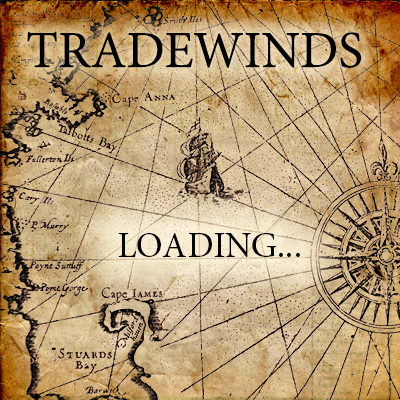
<style>
.page{position:relative;width:400px;height:400px}
.page>*{position:absolute;margin:0}
.t1{font:52px "MinionPro-Regular";color:#000000}
.t2{font:36px "MinionPro-Regular";color:#000000}
</style>
<div class="page">
<p class="t1" style="left:27px;top:31px;width:335px;height:37px">TRADEWINDS</p>
<p class="t2" style="left:118px;top:233px;width:182px;height:24px">LOADING...</p>
</div>
